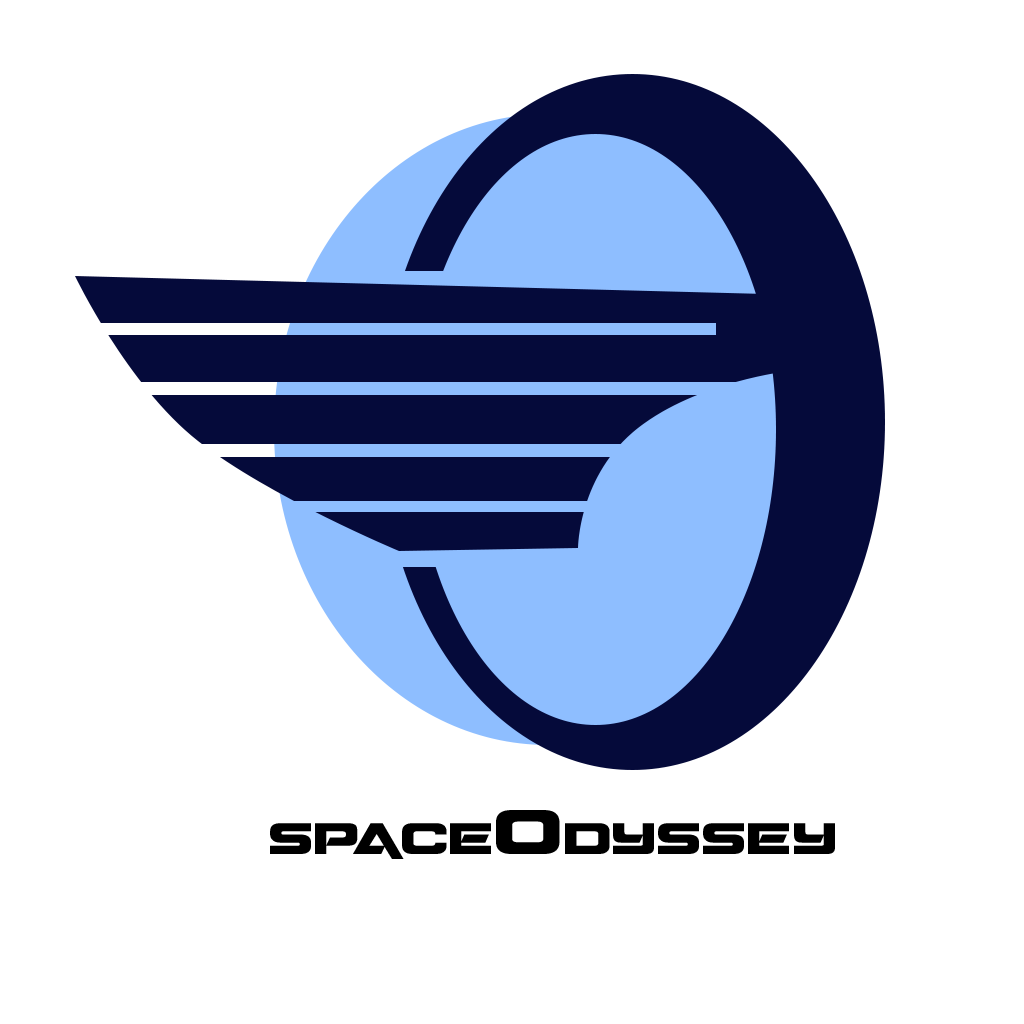
<style>
.page{position:relative;width:1024px;height:1024px;background:#ffffff}
.page>*{position:absolute;margin:0}
.t1{font:98.8px "QuarkStorm";color:#000000;font-variant:small-caps}
</style>
<div class="page">
<p class="t1" style="left:270px;top:810px;width:565px;height:49px">spaceOdyssey</p>
</div>
